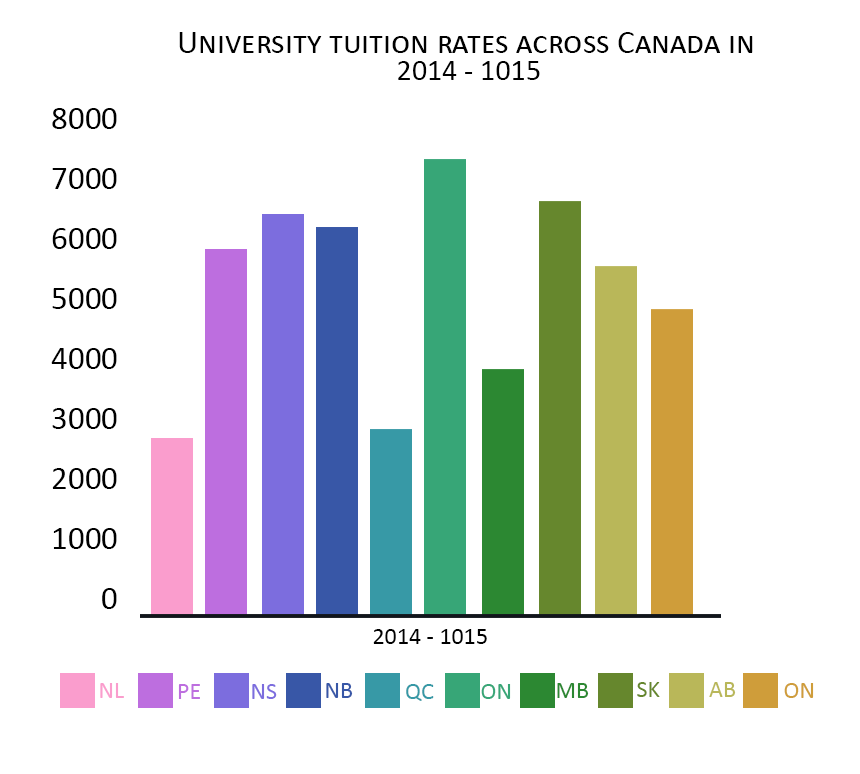
<style>
.page{position:relative;width:860px;height:774px;background:#ffffff}
.page>*{position:absolute;margin:0}
.t1{font:33px "Calibri";color:#000000;font-variant:small-caps}
.t2{font:30px "Calibri";color:#000000;font-variant:small-caps}
.t3{font:33px/60px "Calibri";color:#000000;font-variant:small-caps}
.t4{font:24px "Calibri";color:#000000;font-variant:small-caps}
.t5{font:24px "Calibri";color:#fa9dcd;font-variant:small-caps}
.t6{font:24px "Calibri";color:#bd6edf;font-variant:small-caps}
.t7{font:24px "Calibri";color:#7c6dde;font-variant:small-caps}
.t8{font:24px "Calibri";color:#3857a7;font-variant:small-caps}
.t9{font:24px "Calibri";color:#3799a6;font-variant:small-caps}
.t10{font:24px "Calibri";color:#37a677;font-variant:small-caps}
.t11{font:24px "Calibri";color:#2c8832;font-variant:small-caps}
.t12{font:24px "Calibri";color:#66872d;font-variant:small-caps}
.t13{font:24px "Calibri";color:#b9b759;font-variant:small-caps}
.t14{font:24px "Calibri";color:#cf9d3a;font-variant:small-caps}
</style>
<div class="page">
<p class="t1" style="left:179px;top:32px;width:574px;height:21px">University tuition rates across Canada in</p>
<p class="t2" style="left:398px;top:61px;width:142px;height:19px">2014 - 1015</p>
<p class="t3" style="left:51px;top:108px;width:66px;height:501px;text-align:right">8000<br>7000<br>6000<br>5000<br>4000<br>3000<br>2000<br>1000<br>0</p>
<p class="t4" style="left:373px;top:629px;width:114px;height:15px">2014 - 1015</p>
<p class="t5" style="left:100px;top:683px;width:24px;height:15px">NL</p>
<p class="t6" style="left:178px;top:684px;width:22px;height:15px">PE</p>
<p class="t7" style="left:252px;top:684px;width:25px;height:15px">NS</p>
<p class="t8" style="left:326px;top:683px;width:27px;height:15px">NB</p>
<p class="t9" style="left:406px;top:684px;width:28px;height:17px">QC</p>
<p class="t10" style="left:481px;top:684px;width:30px;height:15px">ON</p>
<p class="t11" style="left:557px;top:683px;width:32px;height:15px">MB</p>
<p class="t12" style="left:637px;top:682px;width:23px;height:15px">SK</p>
<p class="t13" style="left:709px;top:682px;width:27px;height:15px">AB</p>
<p class="t14" style="left:784px;top:683px;width:30px;height:15px">ON</p>
</div>
